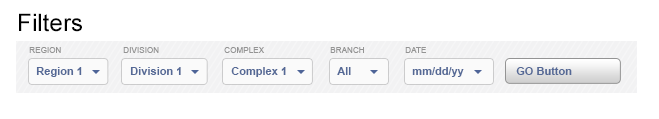
<style>
.page{position:relative;width:659px;height:119px;background:#ffffff}
.page>*{position:absolute;margin:0}
.t1{font:24px "ArialMT";letter-spacing:0.005em;color:#000000}
.t2{font:8px "ArialMT";letter-spacing:0.01em;color:#949494}
.t3{font:11px "Arial-BoldMT";color:#556996}
</style>
<div class="page">
<p class="t1" style="left:19px;top:13px;width:63px;height:19px">Filters</p>
<p class="t2" style="left:29px;top:47px;width:32px;height:6px">REGION</p>
<p class="t2" style="left:123px;top:47px;width:36px;height:6px">DIVISION</p>
<p class="t2" style="left:224px;top:47px;width:41px;height:6px">COMPLEX</p>
<p class="t2" style="left:330px;top:47px;width:34px;height:6px">BRANCH</p>
<p class="t2" style="left:405px;top:47px;width:21px;height:6px">DATE</p>
<p class="t3" style="left:36px;top:67px;width:46px;height:10px">Region 1</p>
<p class="t3" style="left:130px;top:67px;width:51px;height:8px">Division 1</p>
<p class="t3" style="left:231px;top:67px;width:55px;height:10px">Complex 1</p>
<p class="t3" style="left:337px;top:67px;width:14px;height:8px">All</p>
<p class="t3" style="left:412px;top:67px;width:52px;height:10px">mm/dd/yy</p>
<p class="t3" style="left:516px;top:67px;width:56px;height:8px">GO Button</p>
</div>
